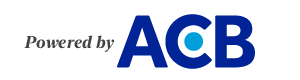
<style>
.page{position:relative;width:300px;height:80px;background:#ffffff}
.page>*{position:absolute;margin:0}
.t1{font:17px "NewYorkLarge-BoldItalic";color:#444444}
</style>
<div class="page">
<p class="t1" style="left:24px;top:35px;width:90px;height:17px">Powered by</p>
</div>
